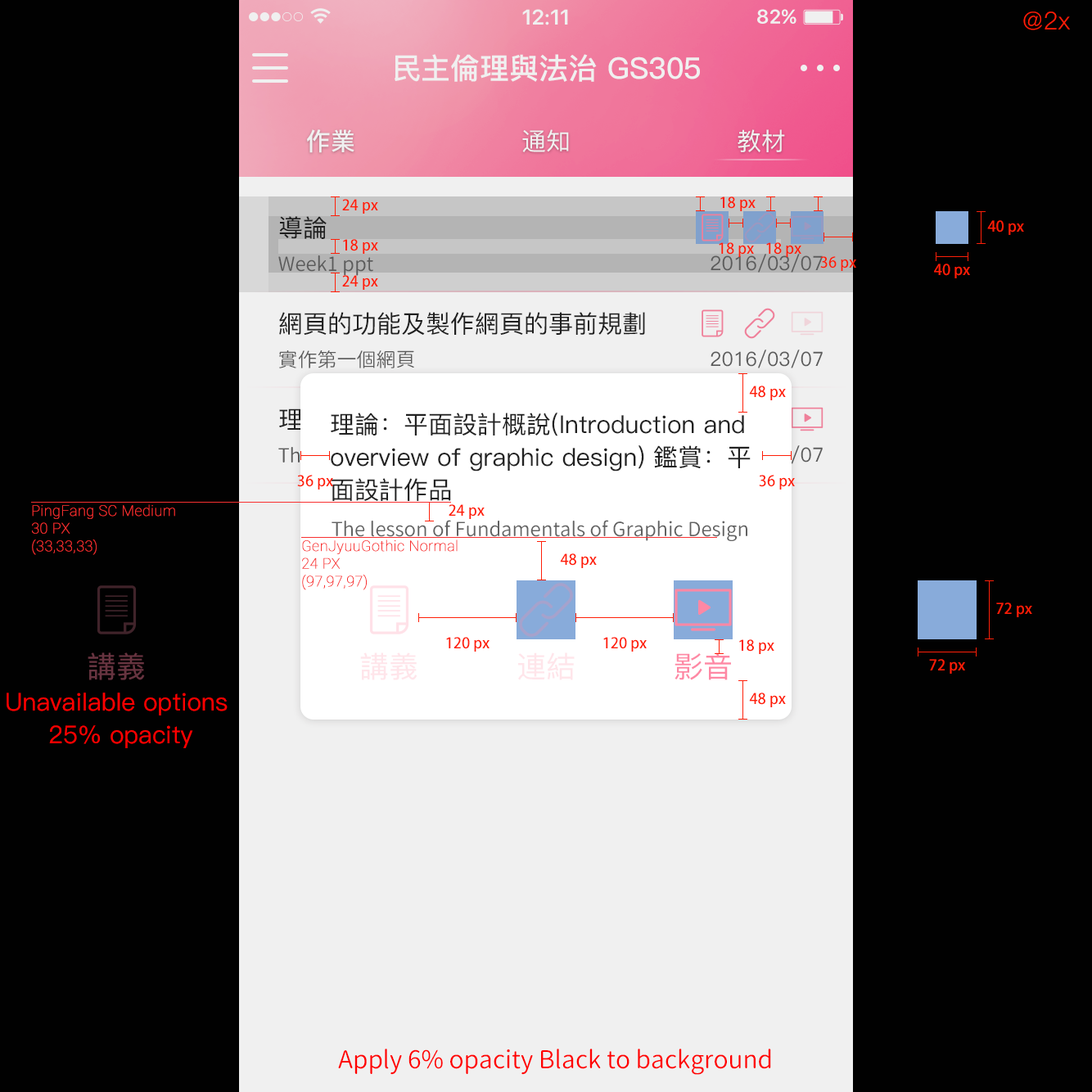
<style>
.page{position:relative;width:1092px;height:1092px;background:#010101}
.page>*{position:absolute;margin:0}
.t1{font:21.3px "SFUIDisplay-Semibold";color:#ffffff}
.t2{font:19.6px "SFUIDisplay-Semibold";letter-spacing:0.025em;color:#ffffff}
.t3{font:24.6px "PingFang-SC-Regular";color:#ff1e07}
.t4{font:29.5px "PingFang-SC-Bold";color:#ffffff}
.t5{font:24.6px "PingFang-SC-Bold";color:#ffffff}
.t6{font:24.6px "PingFang-SC-Medium";color:#ffffff}
.t7{font:14.7px "AdobeFanHeitiStd-Bold";color:#ff1e07}
.t8{font:24.6px "PingFang-SC-Medium";color:#212121}
.t9{font:19.6px "GenJyuuGothic-Normal";color:#616161}
.t10{font:19.6px "PingFang-SC-Medium";color:#616161}
.t11{font:24.6px/32.7px "PingFang-SC-Medium";color:#212121}
.t12{font:14.7px "Roboto-Thin";color:#f83030;font-weight:bold}
.t13{font:29.5px "PingFang-SC-Medium";color:#673440}
.t14{font:29.5px "PingFang-SC-Medium";color:#ffe5ea}
.t15{font:29.5px "PingFang-SC-Medium";color:#fe88a4}
.t16{font:24.6px/32.7px "PingFang-SC-Medium";color:#ff0000}
.t17{font:24.6px "GenJyuuGothic-Normal";color:#ff0000}
</style>
<div class="page">
<p class="t1" style="left:522px;top:9px;width:46px;height:16px">12:11</p>
<p class="t2" style="left:757px;top:9px;width:39px;height:15px">82%</p>
<p class="t3" style="left:1023px;top:11px;width:47px;height:19px">@2x</p>
<p class="t4" style="left:395px;top:54px;width:305px;height:28px">民主倫理與法治 GS305</p>
<p class="t5" style="left:307px;top:129px;width:47px;height:24px">作業</p>
<p class="t6" style="left:522px;top:129px;width:47px;height:23px">通知</p>
<p class="t6" style="left:738px;top:129px;width:47px;height:23px">教材</p>
<p class="t7" style="left:720px;top:196px;width:36px;height:15px">18 px</p>
<p class="t7" style="left:342px;top:199px;width:36px;height:15px">24 px</p>
<p class="t8" style="left:279px;top:216px;width:48px;height:23px">導論</p>
<p class="t7" style="left:987px;top:220px;width:37px;height:15px">40 px</p>
<p class="t7" style="left:343px;top:239px;width:35px;height:15px">18 px</p>
<p class="t7" style="left:719px;top:242px;width:35px;height:15px">18 px</p>
<p class="t7" style="left:766px;top:242px;width:35px;height:15px">18 px</p>
<p class="t9" style="left:278px;top:255px;width:95px;height:21px">Week1 ppt</p>
<p class="t10" style="left:711px;top:254px;width:112px;height:19px">2016/03/07</p>
<p class="t7" style="left:820px;top:256px;width:36px;height:15px">36 px</p>
<p class="t7" style="left:934px;top:264px;width:36px;height:14px">40 px</p>
<p class="t7" style="left:342px;top:275px;width:36px;height:15px">24 px</p>
<p class="t8" style="left:279px;top:312px;width:366px;height:24px">網頁的功能及製作網頁的事前規劃</p>
<p class="t9" style="left:279px;top:350px;width:135px;height:18px">實作第一個網頁</p>
<p class="t10" style="left:711px;top:350px;width:112px;height:18px">2016/03/07</p>
<p class="t7" style="left:749px;top:386px;width:37px;height:14px">48 px</p>
<p class="t11" style="left:331px;top:413px;width:420px;height:88px">理論：平面設計概說(Introduction and  <br>overview of graphic design) 鑑賞：平<br>面設計作品</p>
<p class="t7" style="left:297px;top:475px;width:36px;height:15px">36 px</p>
<p class="t7" style="left:759px;top:475px;width:36px;height:15px">36 px</p>
<p class="t12" style="left:32px;top:504px;width:143px;height:51px">PingFang SC Medium<br>30 PX<br>(33,33,33)</p>
<p class="t7" style="left:449px;top:504px;width:36px;height:15px">24 px</p>
<p class="t9" style="left:332px;top:520px;width:415px;height:21px">The lesson of Fundamentals of Graphic Design</p>
<p class="t12" style="left:302px;top:539px;width:156px;height:51px">GenJyuuGothic Normal<br>24 PX<br>(97,97,97)</p>
<p class="t7" style="left:560px;top:553px;width:37px;height:15px">48 px</p>
<p class="t7" style="left:996px;top:602px;width:36px;height:15px">72 px</p>
<p class="t7" style="left:446px;top:637px;width:44px;height:15px">120 px</p>
<p class="t7" style="left:603px;top:637px;width:44px;height:15px">120 px</p>
<p class="t7" style="left:739px;top:639px;width:35px;height:15px">18 px</p>
<p class="t13" style="left:88px;top:652px;width:57px;height:28px">講義</p>
<p class="t14" style="left:360px;top:652px;width:57px;height:28px">講義</p>
<p class="t14" style="left:518px;top:652px;width:57px;height:28px">連結</p>
<p class="t15" style="left:675px;top:652px;width:56px;height:28px">影音</p>
<p class="t7" style="left:929px;top:659px;width:36px;height:15px">72 px</p>
<p class="t16" style="left:7px;top:693px;width:221px;height:55px;text-align:center">Unavailable options<br> 25% opacity</p>
<p class="t7" style="left:749px;top:693px;width:37px;height:14px">48 px</p>
<p class="t17" style="left:338px;top:1049px;width:433px;height:26px">Apply 6% opacity Black to background</p>
</div>
